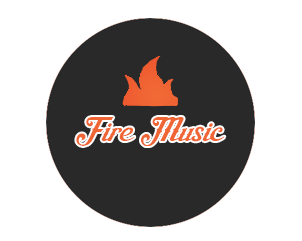
<style>
.page{position:relative;width:302px;height:241px;background:#ffffff}
.page>*{position:absolute;margin:0}
.t1{font:25.4px "AishaScript";color:#f06534}
</style>
<div class="page">
<p class="t1" style="left:76px;top:117px;width:149px;height:29px">Fire Music</p>
</div>
